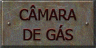
<style>
.page{position:relative;width:96px;height:48px}
.page>*{position:absolute;margin:0}
.t1{font:14.7px/20px "Tahoma";letter-spacing:-0.01em;color:#210808;text-transform:uppercase;font-weight:bold}
</style>
<div class="page">
<p class="t1" style="left:19px;top:5px;width:58px;height:36px;text-align:center">CÂMARA<br>DE GÁS</p>
</div>
